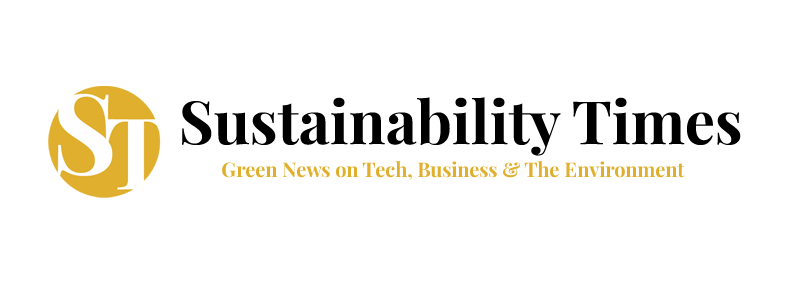
<style>
.page{position:relative;width:797px;height:284px;background:#ffffff}
.page>*{position:absolute;margin:0}
.t1{font:60px "PlayfairDisplay-Bold";color:#010000}
.t2{font:20px "PlayfairDisplay-Bold";color:#dfaf2d}
</style>
<div class="page">
<p class="t1" style="left:182px;top:97px;width:559px;height:59px">Sustainability Times</p>
<p class="t2" style="left:222px;top:161px;width:463px;height:19px">Green News on Tech, Business &amp; The Environment</p>
</div>
